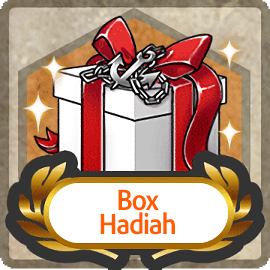
<style>
.page{position:relative;width:270px;height:270px}
.page>*{position:absolute;margin:0}
.t1{font:30px/24px "AdobeClean-Bold";letter-spacing:-0.04em;color:#ff5d00;scale:0.9 1}
</style>
<div class="page">
<p class="t1" style="left:100px;top:189px;width:75px;height:46px;text-align:center">Box<br>Hadiah</p>
</div>
